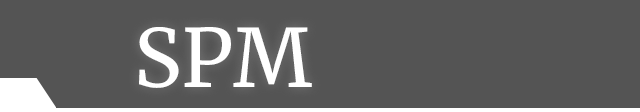
<style>
.page{position:relative;width:640px;height:112px;background:#545454}
.page>*{position:absolute;margin:0}
.t1{font:80px "Merriweather-Regular";color:#ffffff}
</style>
<div class="page">
<p class="t1" style="left:139px;top:27px;width:173px;height:61px">SPM</p>
</div>
